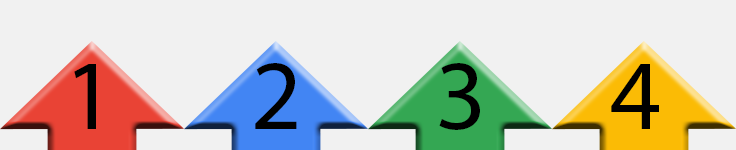
<style>
.page{position:relative;width:736px;height:150px;background:#f1f1f1}
.page>*{position:absolute;margin:0}
.t1{font:100px "MyriadPro-Regular";color:#000000}
</style>
<div class="page">
<p class="t1" style="left:74px;top:64px;width:22px;height:65px">1</p>
<p class="t1" style="left:255px;top:63px;width:42px;height:66px">2</p>
<p class="t1" style="left:439px;top:63px;width:41px;height:67px">3</p>
<p class="t1" style="left:611px;top:64px;width:48px;height:65px">4</p>
</div>
